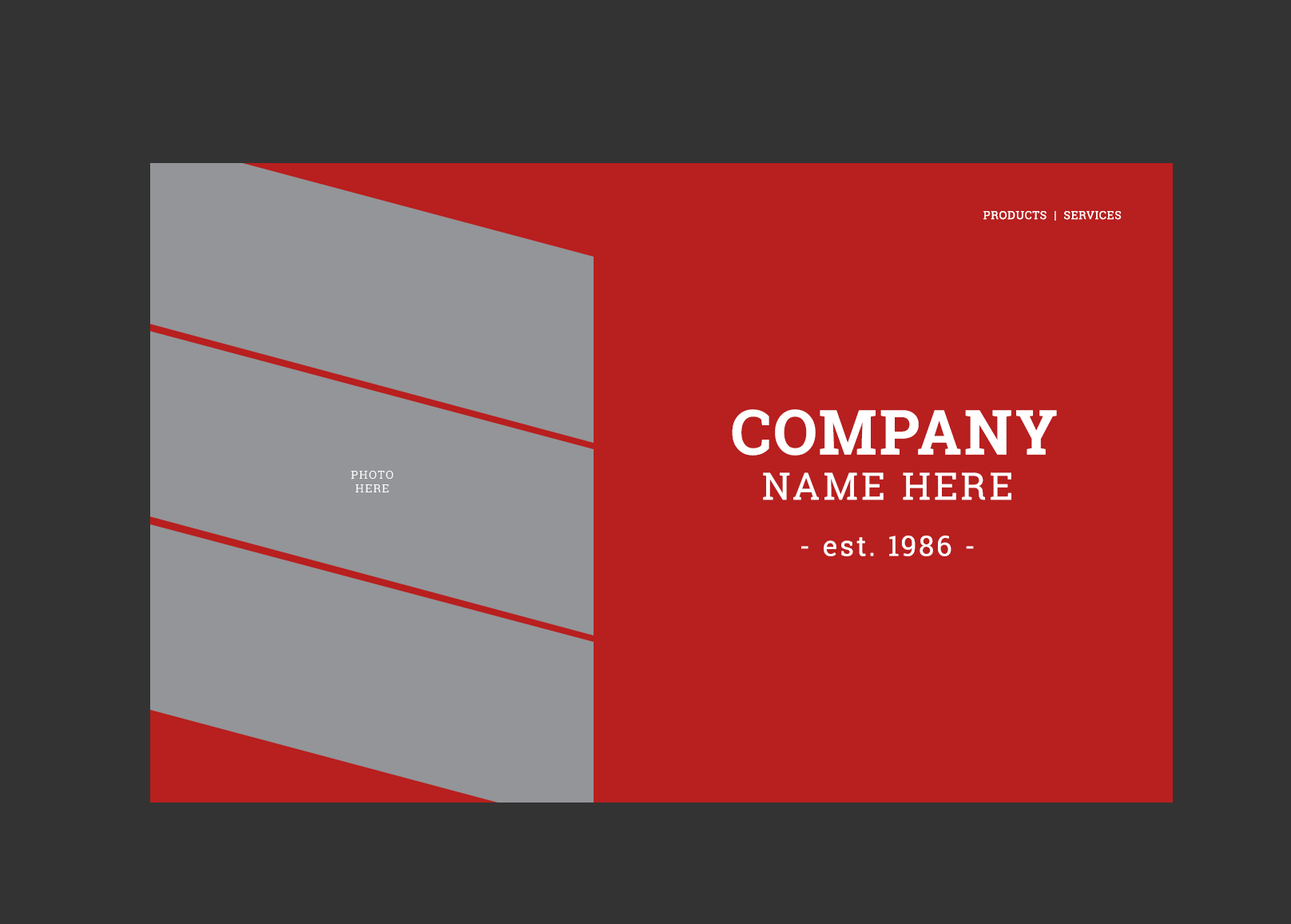
<style>
.page{position:relative;width:1291px;height:924px;background:#333333}
.page>*{position:absolute;margin:0}
.t1{font:11.2px "RobotoSlab-Regular";letter-spacing:0.05em;color:#ffffff;text-transform:uppercase}
.t2{font:62.3px "RobotoSlab-Bold";letter-spacing:0.05em;color:#ffffff}
.t3{font:37.6px "RobotoSlab-Regular";letter-spacing:0.1em;color:#ffffff}
.t4{font:28px "RobotoSlab-Regular";letter-spacing:0.1em;color:#ffffff}
</style>
<div class="page">
<p class="t1" style="left:984px;top:211px;width:138px;height:10px">PRODUCTS  |  SERVICES</p>
<p class="t2" style="left:732px;top:409px;width:325px;height:46px">COMPANY</p>
<p class="t3" style="left:763px;top:472px;width:248px;height:28px">NAME HERE</p>
<p class="t4" style="left:801px;top:535px;width:173px;height:21px">- est. 1986 -</p>
</div>
